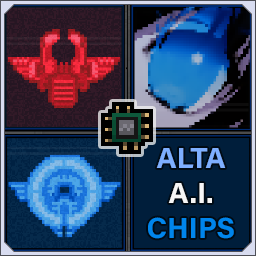
<style>
.page{position:relative;width:256px;height:256px}
.page>*{position:absolute;margin:0}
.t1{font:29.2px "AcuminConcept-Bold";color:#0085eb}
.t2{font:29.2px "AcuminConcept-Bold";color:#7eafff}
.t3{font:29.2px "AcuminConcept-Bold";color:#f6f6f6}
</style>
<div class="page">
<p class="t1" style="left:148px;top:148px;width:86px;height:91px;text-align:center"><span class="t2">ALTA<br></span><span class="t3">A.I.<br></span>CHIPS</p>
</div>
